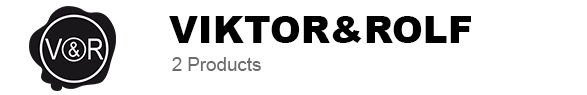
<style>
.page{position:relative;width:587px;height:95px;background:#ffffff}
.page>*{position:absolute;margin:0}
.t1{font:37.5px "Arial-Black";color:#000000}
.t2{font:18.7px "ArialMT";color:#6d6d6d}
</style>
<div class="page">
<p class="t1" style="left:169px;top:16px;width:302px;height:27px">VIKTOR&amp;ROLF</p>
<p class="t2" style="left:172px;top:57px;width:89px;height:14px">2 Products</p>
</div>
